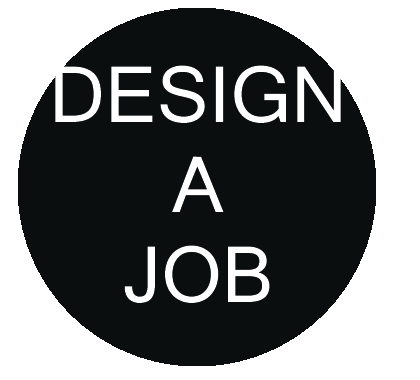
<style>
.page{position:relative;width:420px;height:380px;background:#0b0e0e}
.page>*{position:absolute;margin:0}
.t1{font:75px "Mangal";color:#ffffff}
</style>
<div class="page">
<p class="t1" style="left:55px;top:65px;width:286px;height:238px;text-align:center">DESIGN<br>A<br>JOB</p>
</div>
